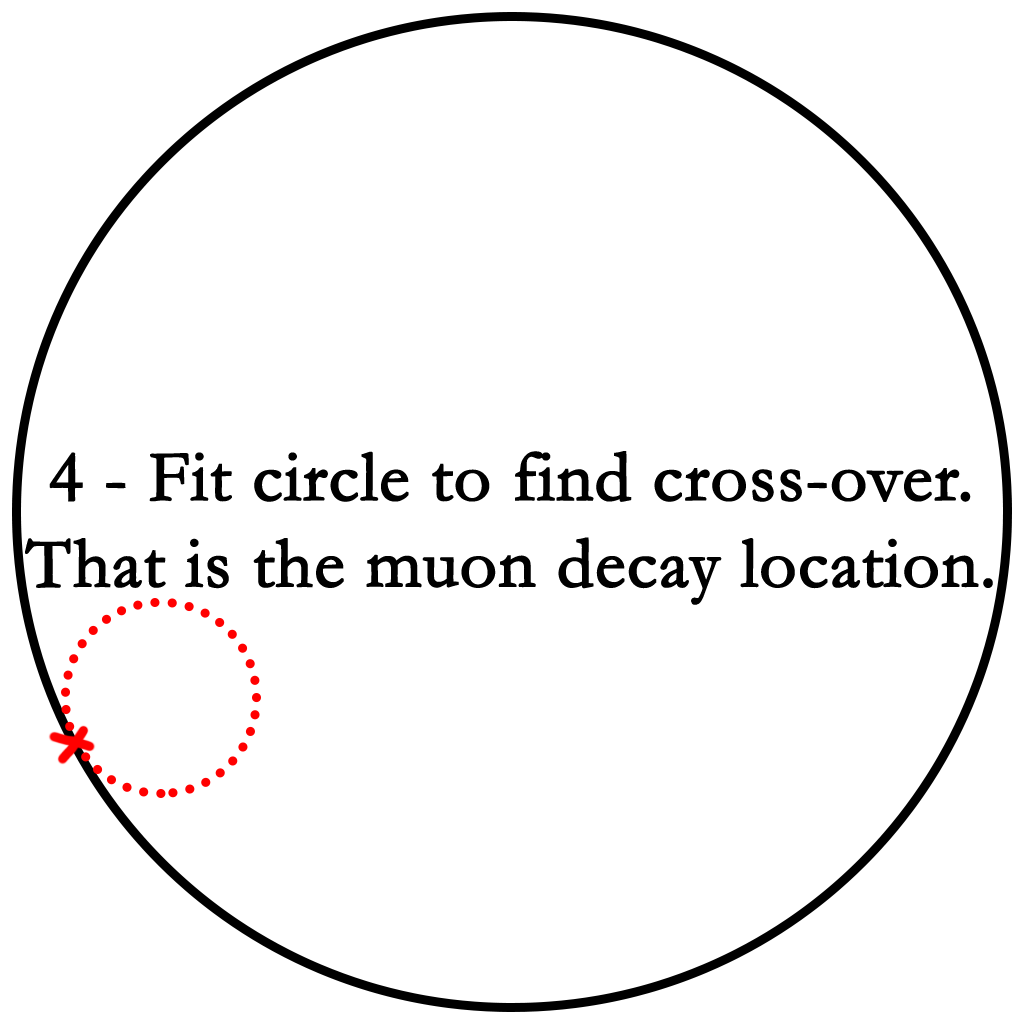
<style>
.page{position:relative;width:1024px;height:1024px;background:#ffffff}
.page>*{position:absolute;margin:0}
.t1{font:72px "Garamond";color:#000000;font-weight:bold}
</style>
<div class="page">
<p class="t1" style="left:25px;top:451px;width:968px;height:154px;text-align:center">4 - Fit circle to find cross-over.<br>That is the muon decay location.</p>
</div>
